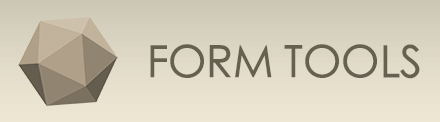
<style>
.page{position:relative;width:440px;height:122px}
.page>*{position:absolute;margin:0}
.t1{font:44px "STHeitiTC-Medium";color:#666051}
</style>
<div class="page">
<p class="t1" style="left:150px;top:44px;width:270px;height:35px">FORM TOOLS</p>
</div>
